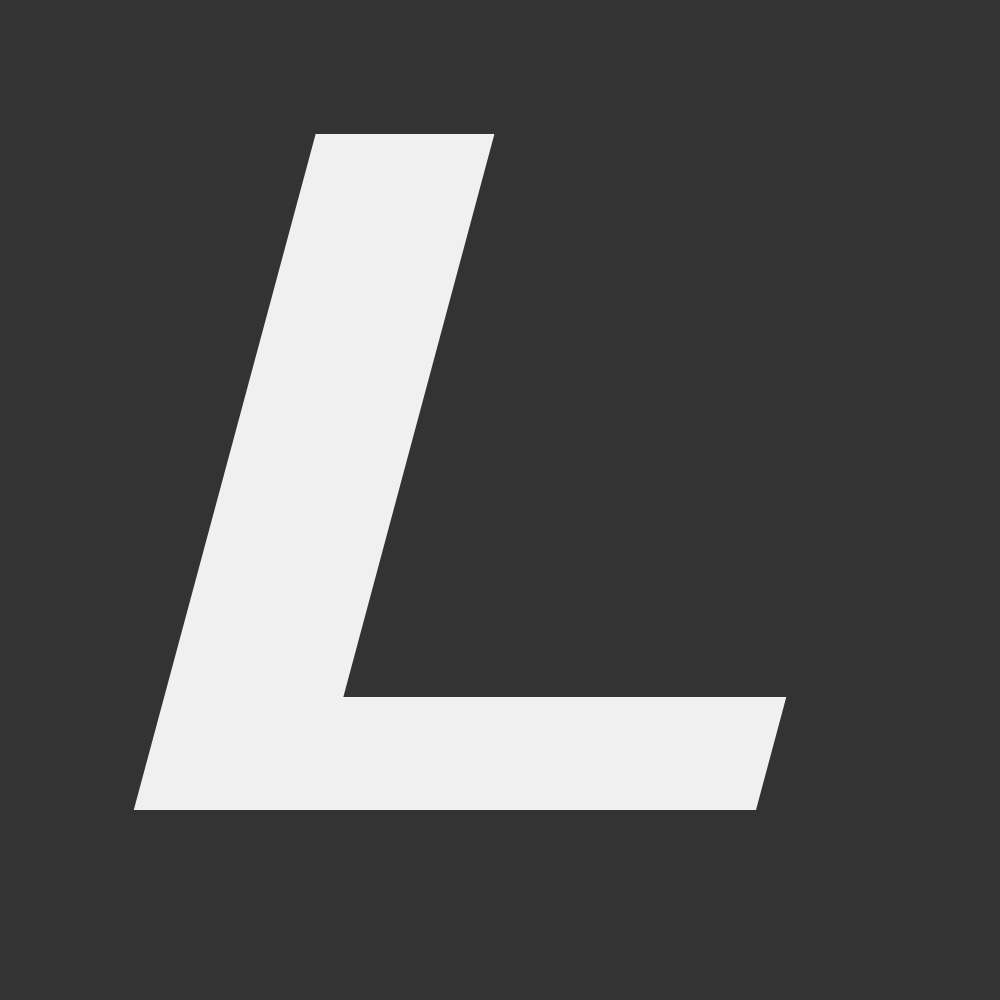
<style>
.page{position:relative;width:1000px;height:1000px;background:#333333}
.page>*{position:absolute;margin:0}
.t1{font:943.9px "Arial-BoldItalicMT";letter-spacing:0.1em;color:#f0f0f0;scale:1.29 1}
</style>
<div class="page">
<p class="t1" style="left:133px;top:134px;width:654px;height:676px">L</p>
</div>
